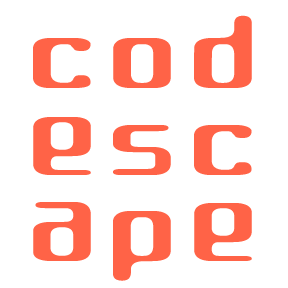
<style>
.page{position:relative;width:288px;height:288px;background:#ffffff}
.page>*{position:absolute;margin:0}
.t1{font:160px/86.4px "CuteFont-Regular";color:#ff6347;scale:1.5 1}
</style>
<div class="page">
<p class="t1" style="left:33px;top:15px;width:219px;height:266px;text-align:center">cod<br>esc<br>ape</p>
</div>
